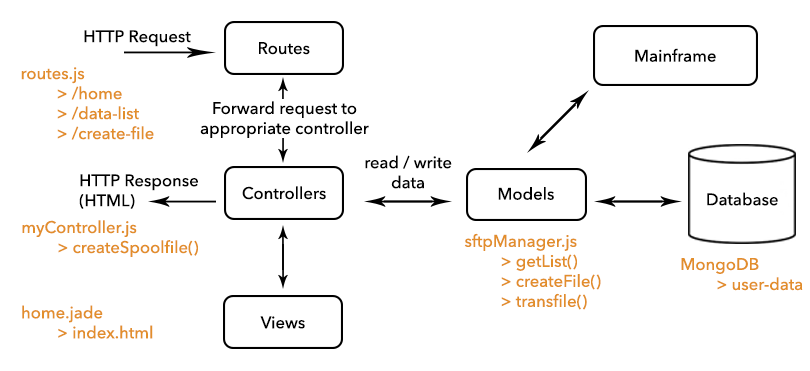
<style>
.page{position:relative;width:810px;height:371px;background:#ffffff}
.page>*{position:absolute;margin:0}
.t1{font:16.7px "AvenirNext-Medium";color:#000000}
.t2{font:16.7px "AvenirNext-Medium";color:#e28e2b}
</style>
<div class="page">
<p class="t1" style="left:84px;top:30px;width:107px;height:17px">HTTP Request</p>
<p class="t1" style="left:259px;top:42px;width:51px;height:13px">Routes</p>
<p class="t1" style="left:635px;top:48px;width:81px;height:14px">Mainframe</p>
<p class="t2" style="left:21px;top:67px;width:133px;height:73px">routes.js<br> &gt; /home<br> &gt; /data-list<br> &gt; /create-file</p>
<p class="t1" style="left:200px;top:101px;width:169px;height:37px;text-align:center">Forward request to<br>appropriate controller</p>
<p class="t1" style="left:365px;top:155px;width:87px;height:34px;text-align:center">read / write<br>data</p>
<p class="t1" style="left:79px;top:174px;width:119px;height:35px">HTTP Response<br>(HTML)</p>
<p class="t1" style="left:242px;top:186px;width:84px;height:14px">Controllers</p>
<p class="t1" style="left:498px;top:187px;width:56px;height:13px">Models</p>
<p class="t1" style="left:707px;top:192px;width:71px;height:14px">Database</p>
<p class="t2" style="left:22px;top:220px;width:176px;height:37px">myController.js<br> &gt; createSpoolfile()</p>
<p class="t2" style="left:464px;top:233px;width:137px;height:77px">sftpManager.js<br> &gt; getList()<br> &gt; createFile()<br> &gt; transfile()</p>
<p class="t2" style="left:681px;top:258px;width:122px;height:33px">MongoDB<br> &gt; user-data</p>
<p class="t2" style="left:22px;top:305px;width:131px;height:34px">home.jade<br> &gt; index.html</p>
<p class="t1" style="left:260px;top:316px;width:45px;height:13px">Views</p>
</div>
